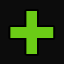
<style>
.page{position:relative;width:64px;height:64px;background:#0c0c0c}
.page>*{position:absolute;margin:0}
.t1{font:85.1px "Arial-BoldMT";color:#6bcc16}
</style>
<div class="page">
<p class="t1" style="left:10px;top:11px;width:44px;height:43px">+</p>
</div>
